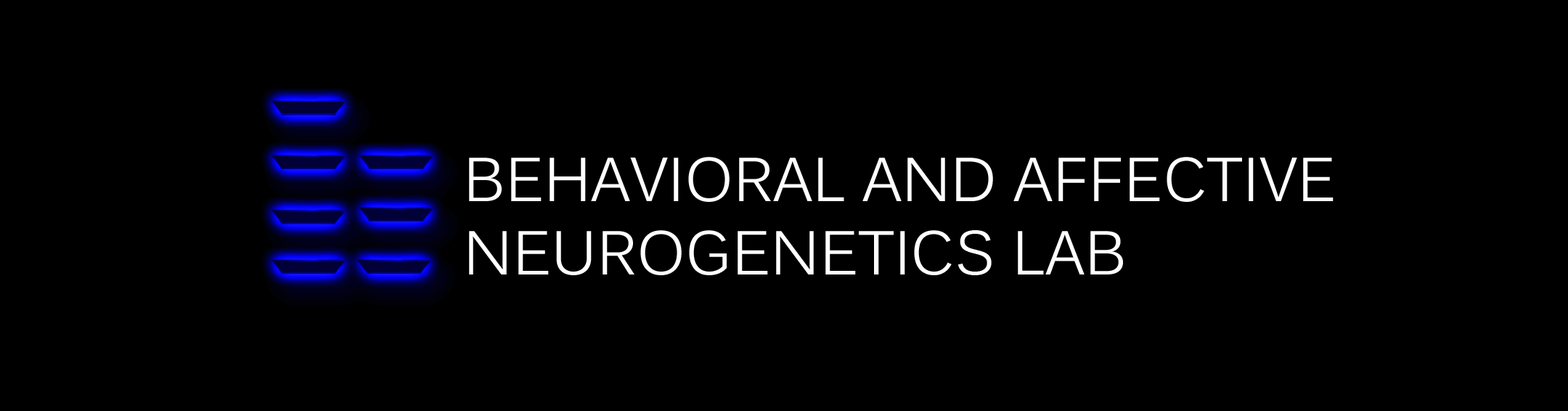
<style>
.page{position:relative;width:1568px;height:411px;background:#000000}
.page>*{position:absolute;margin:0}
.t1{font:61px "Kalinga";color:#ffffff}
</style>
<div class="page">
<p class="t1" style="left:469px;top:157px;width:865px;height:118px">BEHAVIORAL AND AFFECTIVE <br>NEUROGENETICS LAB</p>
</div>
